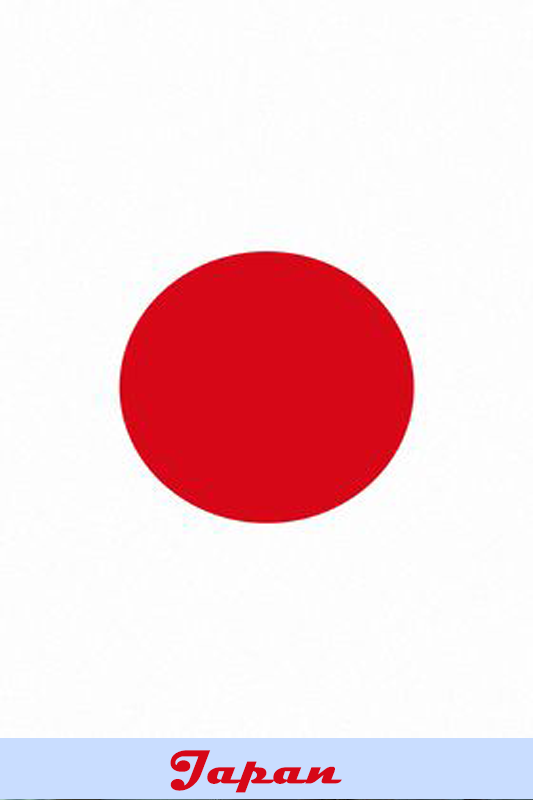
<style>
.page{position:relative;width:533px;height:800px;background:#fdfdfd}
.page>*{position:absolute;margin:0}
.t1{font:48px "Magneto-Bold";color:#d60717;scale:1.08 1}
</style>
<div class="page">
<p class="t1" style="left:170px;top:750px;width:172px;height:43px">Japan</p>
</div>
